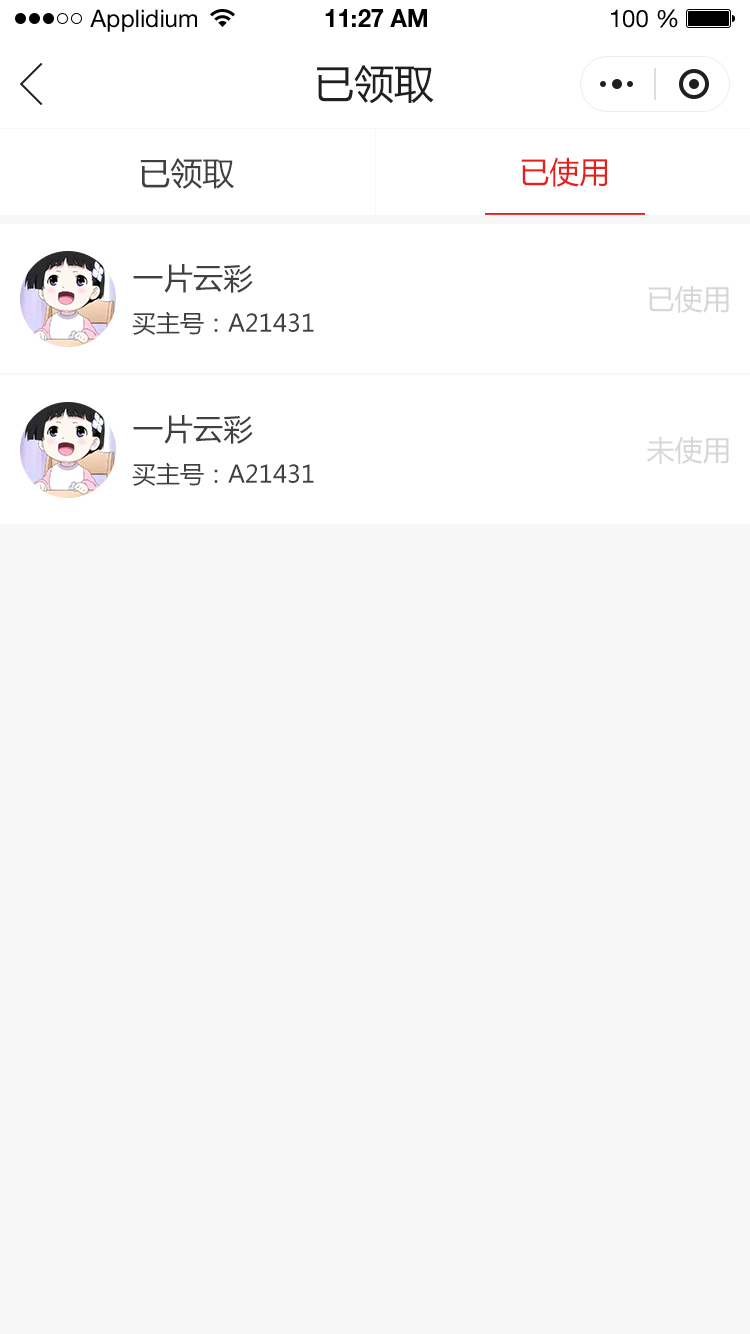
<style>
.page{position:relative;width:750px;height:1334px;background:#f7f7f7}
.page>*{position:absolute;margin:0}
.t1{font:24px "HelveticaNeueLTStd-Roman";color:#000000}
.t2{font:24px "HelveticaNeueLTStd-Bd";color:#000000}
.t3{font:40px "MicrosoftYaHei";color:#202020;text-transform:uppercase}
.t4{font:32px "MicrosoftYaHei";color:#404040;text-transform:uppercase}
.t5{font:30px "MicrosoftYaHei";color:#e61f18;text-transform:uppercase}
.t6{font:30px "MicrosoftYaHei";color:#404040;text-transform:uppercase}
.t7{font:28px "MicrosoftYaHei";color:#d6d6d6;text-transform:uppercase}
.t8{font:24px "MicrosoftYaHei";color:#404040;text-transform:uppercase}
</style>
<div class="page">
<p class="t1" style="left:90px;top:9px;width:107px;height:23px">Applidium</p>
<p class="t2" style="left:325px;top:9px;width:102px;height:18px">11:27 AM</p>
<p class="t1" style="left:611px;top:9px;width:67px;height:19px">100 %</p>
<p class="t3" style="left:317px;top:65px;width:117px;height:39px">已领取</p>
<p class="t4" style="left:140px;top:158px;width:94px;height:31px">已领取</p>
<p class="t5" style="left:521px;top:157px;width:86px;height:30px">已使用</p>
<p class="t6" style="left:133px;top:264px;width:120px;height:29px">一片云彩</p>
<p class="t7" style="left:648px;top:285px;width:81px;height:28px">已使用</p>
<p class="t8" style="left:132px;top:311px;width:182px;height:24px">买主号：A21431</p>
<p class="t6" style="left:133px;top:415px;width:120px;height:29px">一片云彩</p>
<p class="t7" style="left:647px;top:436px;width:82px;height:28px">未使用</p>
<p class="t8" style="left:132px;top:462px;width:182px;height:24px">买主号：A21431</p>
</div>
